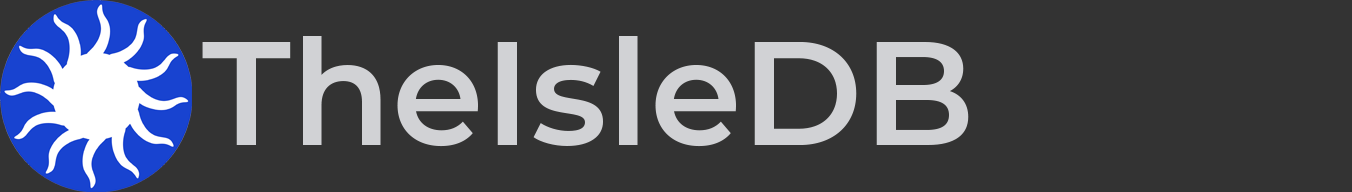
<style>
.page{position:relative;width:1352px;height:192px;background:#333333}
.page>*{position:absolute;margin:0}
.t1{font:147.5px "Montserrat-SemiBold";color:#d1d2d5}
</style>
<div class="page">
<p class="t1" style="left:202px;top:36px;width:767px;height:111px">TheIsleDB</p>
</div>
